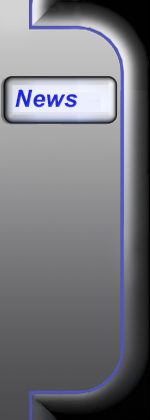
<style>
.page{position:relative;width:150px;height:420px}
.page>*{position:absolute;margin:0}
.t1{font:24px "Arial-BoldItalicMT";color:#1f28d9}
</style>
<div class="page">
<p class="t1" style="left:15px;top:89px;width:63px;height:19px">News</p>
</div>
